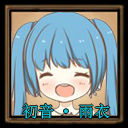
<style>
.page{position:relative;width:128px;height:128px}
.page>*{position:absolute;margin:0}
.t1{font:12px "SimSun";color:#15d0e1}
</style>
<div class="page">
<p class="t1" style="left:22px;top:103px;width:88px;height:16px">初音·雨衣</p>
</div>
